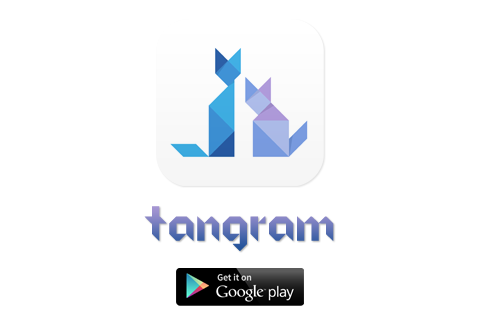
<style>
.page{position:relative;width:480px;height:320px;background:#ffffff}
.page>*{position:absolute;margin:0}
.t1{font:48.2px "Origram"}
</style>
<div class="page">
<p class="t1" style="left:144px;top:206px;width:190px;height:45px">tangram</p>
</div>
